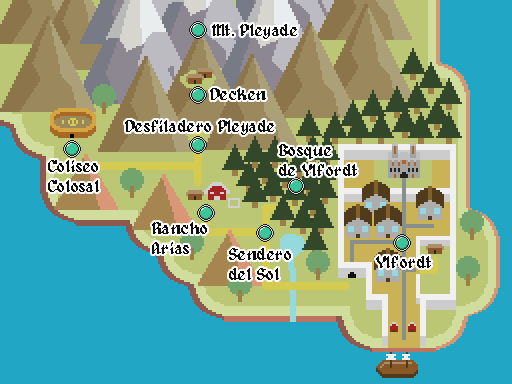
<style>
.page{position:relative;width:512px;height:384px;background:#21a6c5}
.page>*{position:absolute;margin:0}
.t1{font:16.7px "Alagard";color:#0d0d0d}
</style>
<div class="page">
<p class="t1" style="left:212px;top:24px;width:85px;height:15px">Mt. Pleyade</p>
<p class="t1" style="left:210px;top:88px;width:56px;height:12px">Decken</p>
<p class="t1" style="left:125px;top:120px;width:149px;height:15px">Desfiladero Pleyade</p>
<p class="t1" style="left:279px;top:144px;width:78px;height:32px">Bosque <br>de Ylfordt</p>
<p class="t1" style="left:48px;top:160px;width:51px;height:32px">Coliseo<br>Colosal</p>
<p class="t1" style="left:152px;top:222px;width:55px;height:32px">Rancho<br>Arias</p>
<p class="t1" style="left:229px;top:248px;width:62px;height:32px">Sendero<br>del Sol</p>
<p class="t1" style="left:376px;top:256px;width:55px;height:12px">Ylfordt</p>
</div>
